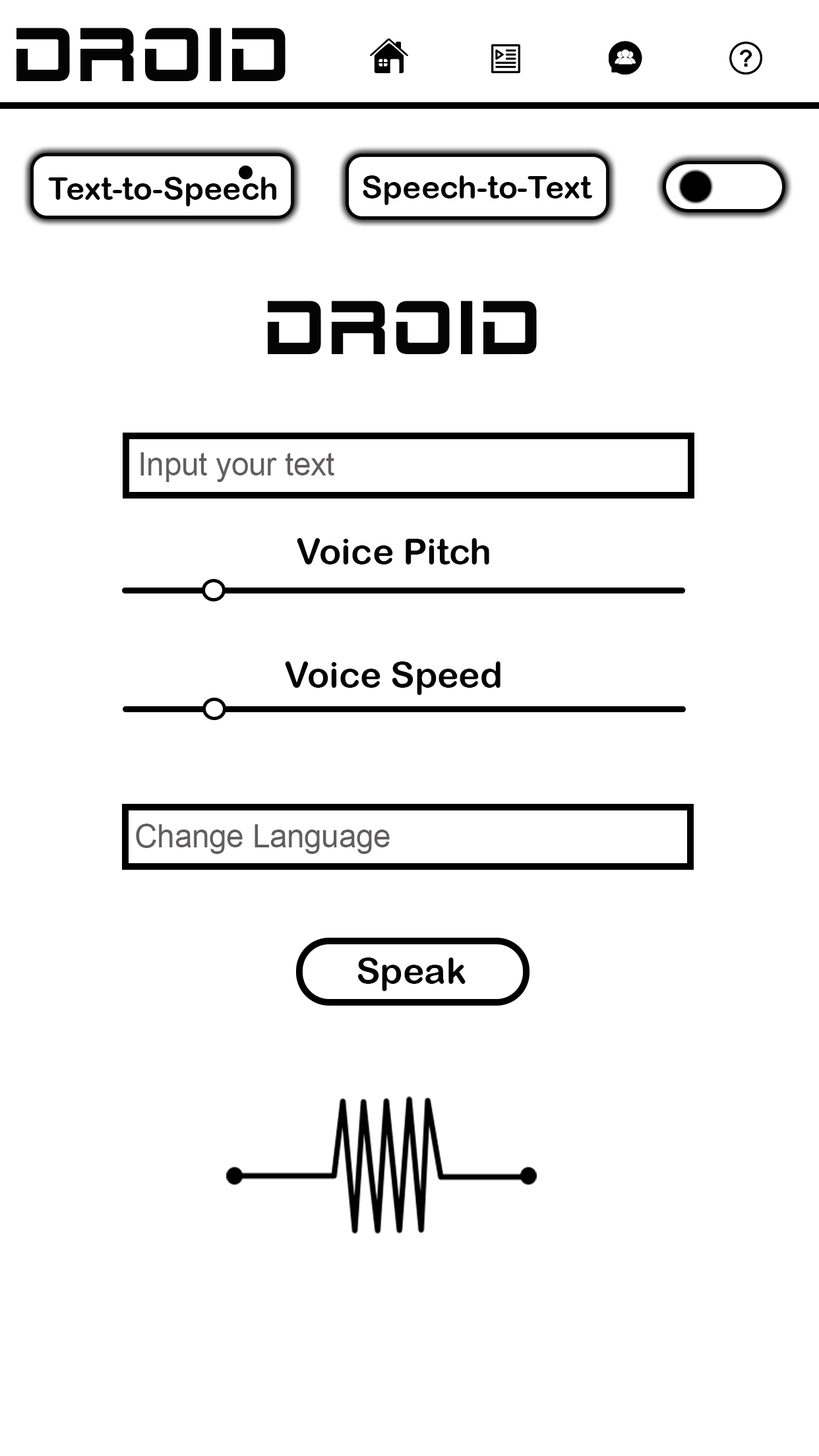
<style>
.page{position:relative;width:819px;height:1456px;background:#ffffff}
.page>*{position:absolute;margin:0}
.t1{font:78px "2015Cruiser";letter-spacing:-0.005em;color:#040404}
.t2{font:31.8px "ArialRoundedMTBold";letter-spacing:-0.005em;color:#030303}
.t3{font:31.4px "ArialMT";letter-spacing:-0.005em;color:#605e5e}
.t4{font:36.4px "ArialRoundedMTBold";letter-spacing:-0.005em;color:#030303}
</style>
<div class="page">
<p class="t1" style="left:16px;top:28px;width:270px;height:54px">Droid</p>
<p class="t2" style="left:48px;top:177px;width:228px;height:29px">Text-to-Speech</p>
<p class="t2" style="left:363px;top:175px;width:229px;height:30px">Speech-to-Text</p>
<p class="t1" style="left:267px;top:301px;width:270px;height:54px">Droid</p>
<p class="t3" style="left:140px;top:452px;width:194px;height:30px">Input your text</p>
<p class="t4" style="left:297px;top:538px;width:192px;height:26px">Voice Pitch</p>
<p class="t4" style="left:285px;top:661px;width:215px;height:34px">Voice Speed</p>
<p class="t3" style="left:136px;top:824px;width:254px;height:30px">Change Language</p>
<p class="t4" style="left:357px;top:957px;width:109px;height:34px">Speak</p>
</div>
